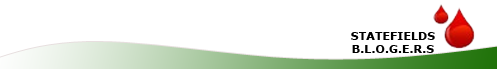
<style>
.page{position:relative;width:497px;height:69px;background:#ffffff}
.page>*{position:absolute;margin:0}
.t1{font:11.1px "Verdana-Bold";color:#000000}
</style>
<div class="page">
<p class="t1" style="left:351px;top:32px;width:84px;height:8px">STATEFIELDS</p>
<p class="t1" style="left:352px;top:45px;width:82px;height:8px">B.L.O.G.E.R.S</p>
</div>
